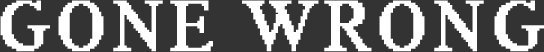
<style>
.page{position:relative;width:544px;height:52px;background:#333333}
.page>*{position:absolute;margin:0}
.t1{font:72px "MS Serif";letter-spacing:0.075em;color:#ffffff;font-weight:bold}
</style>
<div class="page">
<p class="t1" style="left:0px;top:0px;width:544px;height:52px">GONE WRONG</p>
</div>
